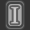
<style>
.page{position:relative;width:30px;height:30px;background:#333333}
.page>*{position:absolute;margin:0}
.t1{font:24px "ShouShuti";color:#cac9c9;font-weight:bold}
</style>
<div class="page">
<p class="t1" style="left:11px;top:7px;width:8px;height:17px">I</p>
</div>
